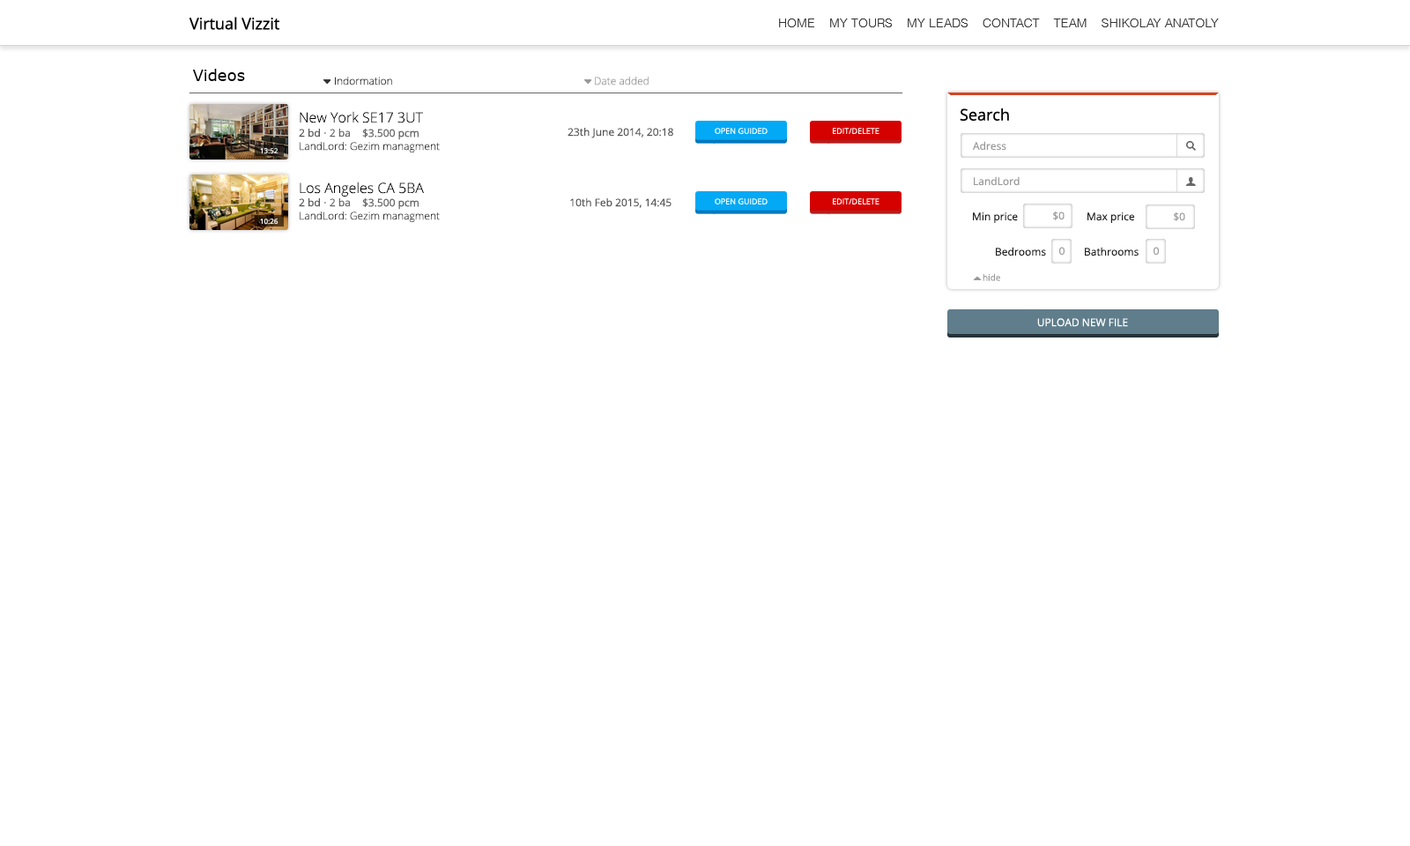
<style>
.page{position:relative;width:1410px;height:846px;background:#ffffff}
.page>*{position:absolute;margin:0}
.t1{font:15.9px "OpenSans";color:#000000}
.t2{font:12.3px "Helvetica-Light";color:#333333}
.t3{font:15.9px "Verdana";color:#000000}
.t4{font:10.6px "OpenSans-Light";color:#333333}
.t5{font:10.6px "OpenSans-Light";color:#999999}
.t6{font:14.1px "OpenSans-Light";color:#000000}
.t7{font:10.6px "OpenSans";color:#555555}
.t8{font:10.6px "TimesNewRomanPSMT";color:#000000}
.t9{font:10.6px "OpenSans";color:#666666}
.t10{font:7.9px "OpenSans";color:#ffffff;text-transform:uppercase}
.t11{font:7px "OpenSans";color:#ffffff}
.t12{font:10.6px "OpenSans";color:#999999}
.t13{font:10.6px "OpenSans";color:#202020}
.t14{font:8.8px "OpenSans";color:#999999}
.t15{font:10.6px "OpenSans";color:#ffffff;text-transform:uppercase}
</style>
<div class="page">
<p class="t1" style="left:189px;top:17px;width:90px;height:13px">Virtual Vizzit</p>
<p class="t2" style="left:779px;top:19px;width:440px;height:8px">HOME    MY TOURS    MY LEADS    CONTACT    TEAM    SHIKOLAY ANATOLY</p>
<p class="t3" style="left:193px;top:69px;width:52px;height:12px">Videos</p>
<p class="t4" style="left:335px;top:77px;width:57px;height:8px">Indormation</p>
<p class="t5" style="left:595px;top:77px;width:53px;height:8px">Date added</p>
<p class="t6" style="left:300px;top:111px;width:123px;height:12px">New York SE17 3UT</p>
<p class="t1" style="left:960px;top:108px;width:49px;height:13px">Search</p>
<p class="t7" style="left:299px;top:129px;width:51px;height:8px">2 bd <span class="t8">· </span><span class="t9">2 ba</span></p>
<p class="t9" style="left:362px;top:129px;width:57px;height:11px">$3.500 pcm</p>
<p class="t7" style="left:567px;top:128px;width:106px;height:10px">23th June 2014, 20:18</p>
<p class="t10" style="left:715px;top:128px;width:52px;height:6px">OPEN GUIDED</p>
<p class="t10" style="left:833px;top:128px;width:46px;height:6px">EDIT/DELete</p>
<p class="t11" style="left:260px;top:148px;width:18px;height:6px">13:52</p>
<p class="t4" style="left:300px;top:142px;width:140px;height:11px">LandLord: Gezim managment</p>
<p class="t12" style="left:973px;top:141px;width:33px;height:10px">Adress</p>
<p class="t6" style="left:300px;top:182px;width:124px;height:14px">Los Angeles CA 5BA</p>
<p class="t12" style="left:974px;top:176px;width:45px;height:10px">LandLord</p>
<p class="t7" style="left:299px;top:198px;width:51px;height:9px">2 bd <span class="t8">· </span><span class="t9">2 ba</span></p>
<p class="t9" style="left:362px;top:198px;width:57px;height:12px">$3.500 pcm</p>
<p class="t7" style="left:570px;top:198px;width:101px;height:10px">10th Feb 2015, 14:45</p>
<p class="t10" style="left:715px;top:198px;width:52px;height:6px">OPEN GUIDED</p>
<p class="t10" style="left:833px;top:198px;width:46px;height:6px">EDIT/DELete</p>
<p class="t11" style="left:260px;top:219px;width:18px;height:6px">10:26</p>
<p class="t4" style="left:300px;top:211px;width:140px;height:12px">LandLord: Gezim managment</p>
<p class="t13" style="left:973px;top:212px;width:45px;height:11px">Min price</p>
<p class="t12" style="left:1053px;top:211px;width:11px;height:9px">$0</p>
<p class="t13" style="left:1087px;top:212px;width:48px;height:11px">Max price</p>
<p class="t12" style="left:1174px;top:212px;width:11px;height:9px">$0</p>
<p class="t13" style="left:996px;top:247px;width:50px;height:9px">Bedrooms</p>
<p class="t12" style="left:1059px;top:247px;width:5px;height:9px">0</p>
<p class="t13" style="left:1085px;top:247px;width:53px;height:9px">Bathrooms</p>
<p class="t12" style="left:1153px;top:247px;width:6px;height:9px">0</p>
<p class="t14" style="left:982px;top:273px;width:18px;height:8px">hide</p>
<p class="t15" style="left:1037px;top:318px;width:91px;height:9px">upload new FILE</p>
</div>
